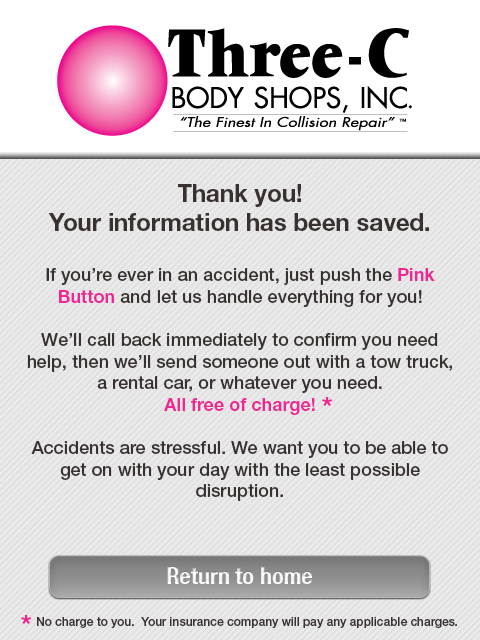
<style>
.page{position:relative;width:480px;height:640px;background:#eaeaea}
.page>*{position:absolute;margin:0}
.t1{font:18px "HelveticaNeueLTStd-Md";color:#393030}
.t2{font:24px "HelveticaNeueLTStd-Bd";color:#393030}
.t3{font:18px "HelveticaNeueLTStd-Bd";color:#ed2793}
.t4{font:28px "HelveticaNeueLTStd-Bd";color:#ed2793}
.t5{font:24px "HelveticaNeueLTStd-BdCn";color:#eeeeee}
.t6{font:12px "HelveticaNeueLTStd-Md";color:#393030}
</style>
<div class="page">
<p class="t1" style="left:27px;top:184px;width:425px;height:317px;text-align:center"><span class="t2">Thank you!<br>Your information has been saved.<br><br></span>If you’re ever in an accident, just push the <span class="t3">Pink Button</span> and let us handle everything for you!<br><br>We’ll call back immediately to confirm you need help, then we’ll send someone out with a tow truck, a rental car, or whatever you need.<br><span class="t3">All free of charge!<br><br></span>Accidents are stressful. We want you to be able to get on with your day with the least possible disruption.</p>
<p class="t4" style="left:322px;top:397px;width:11px;height:10px">*</p>
<p class="t5" style="left:167px;top:566px;width:145px;height:18px">Return to home</p>
<p class="t4" style="left:21px;top:615px;width:11px;height:10px">*</p>
<p class="t6" style="left:37px;top:617px;width:420px;height:11px">No charge to you.  Your insurance company will pay any applicable charges.</p>
</div>
